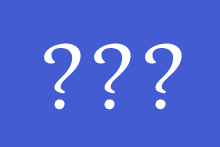
<style>
.page{position:relative;width:220px;height:147px;background:#445cd2}
.page>*{position:absolute;margin:0}
.t1{font:112.3px "Gabriola";letter-spacing:0.05em;color:#ffffff;scale:1.1 1}
</style>
<div class="page">
<p class="t1" style="left:44px;top:43px;width:138px;height:67px">???</p>
</div>
